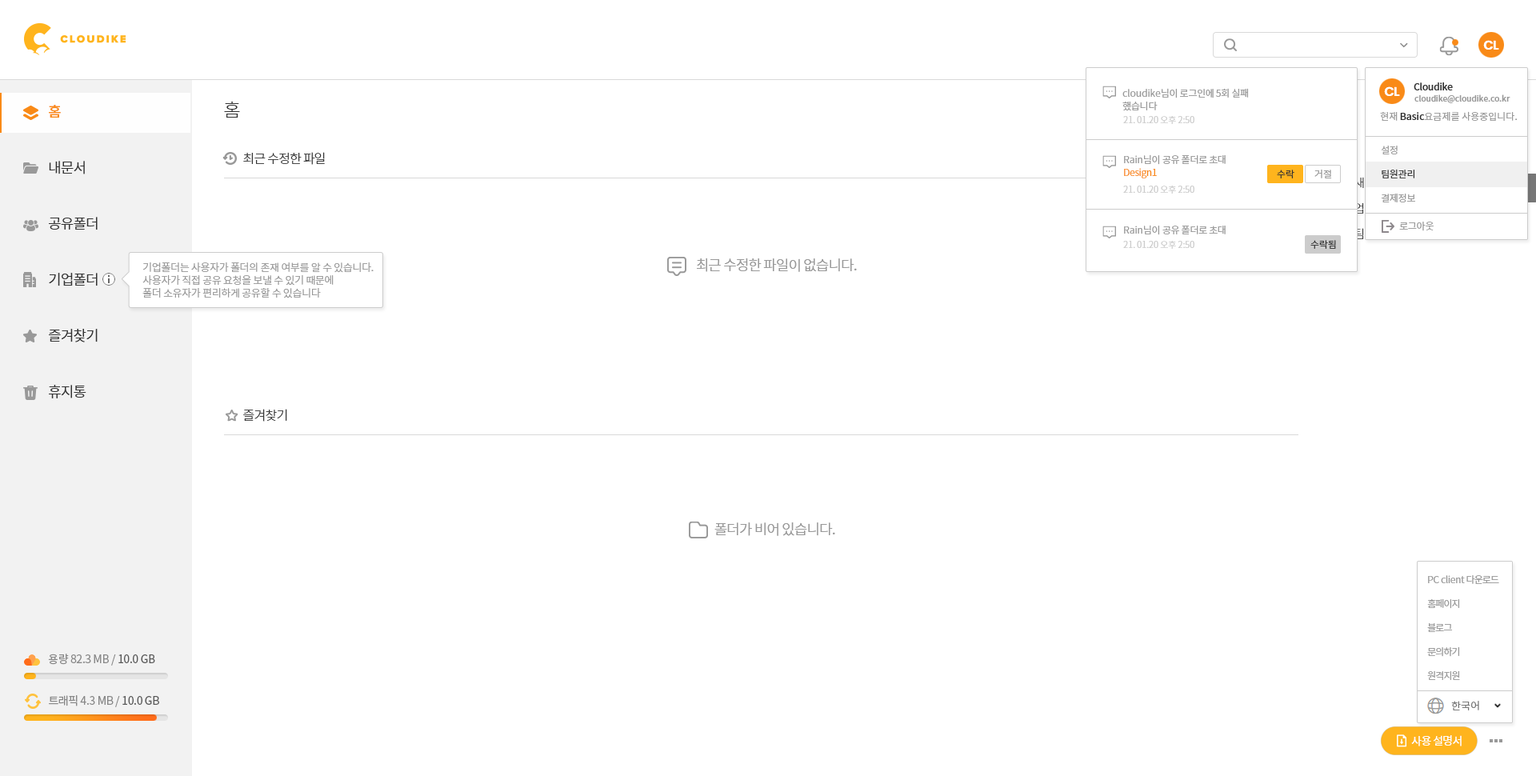
<style>
.page{position:relative;width:1536px;height:776px;background:#ffffff}
.page>*{position:absolute;margin:0}
.t1{font:12.8px "Poppins-SemiBold";letter-spacing:-0.05em;color:#ffffff}
.t2{font:9.6px/12.8px "NotoSansCJKkr-DemiLight";letter-spacing:-0.025em;color:#999999}
.t3{font:9.6px/12.8px "NotoSansCJKkr-DemiLight";color:#999999}
.t4{font:9.6px "NotoSansCJKkr-Medium";letter-spacing:-0.025em;color:#333333}
.t5{font:18.4px "NotoSansCJKkr-Light";letter-spacing:-0.05em;color:#333333}
.t6{font:8px "NotoSansCJKkr-Medium";color:#999999}
.t7{font:14.4px/56px "NotoSansCJKkr-DemiLight";letter-spacing:-0.05em;color:#333333}
.t8{font:14.4px/56px "NotoSansCJKkr-Medium";letter-spacing:-0.05em;color:#f98a17}
.t9{font:9.6px "NotoSansCJKkr-Regular";color:#999999}
.t10{font:9.6px "NotoSansCJKkr-Medium";color:#333333}
.t11{font:8.8px "NotoSansCJKkr-DemiLight";letter-spacing:-0.01em;color:#cccccc}
.t12{font:9.6px/24px "NotoSansCJKkr-DemiLight";letter-spacing:-0.025em;color:#333333}
.t13{font:9.6px/24px "NotoSansCJKkr-DemiLight";letter-spacing:-0.025em;color:#999999}
.t14{font:12.8px "NotoSansCJKkr-Light";letter-spacing:-0.05em;color:#333333}
.t15{font:9.6px/12.8px "NotoSansCJKkr-DemiLight";letter-spacing:-0.025em;color:#f98a17}
.t16{font:9.6px "NotoSansCJKkr-DemiLight";letter-spacing:-0.01em;color:#333333}
.t17{font:9.6px "NotoSansCJKkr-DemiLight";letter-spacing:-0.01em;color:#999999}
.t18{font:9.6px "NotoSansCJKkr-DemiLight";letter-spacing:-0.025em;color:#999999}
.t19{font:9.6px "NotoSansCJKkr-DemiLight";color:#999999}
.t20{font:14.4px "NotoSansCJKkr-DemiLight";letter-spacing:-0.05em;color:#999999}
.t21{font:10.4px/12.8px "NotoSansCJKkr-DemiLight";letter-spacing:-0.025em;color:#999999}
.t22{font:9.6px/24px "NotoSansCJKkr-DemiLight";letter-spacing:-0.075em;color:#999999}
.t23{font:11.2px "NotoSansCJKkr-Regular";letter-spacing:-0.025em;color:#888888}
.t24{font:11.2px "NotoSansCJKkr-Regular";letter-spacing:-0.025em;color:#585858}
.t25{font:10.4px "NotoSansCJKkr-DemiLight";color:#717171}
.t26{font:11.2px "NotoSansCJKkr-Regular";letter-spacing:-0.05em;color:#ffffff}
</style>
<div class="page">
<p class="t1" style="left:1484px;top:40px;width:16px;height:10px">CL</p>
<p class="t2" style="left:1123px;top:88px;width:126px;height:23px"><span class="t3">cloudike</span>님이 로그인에 5회 실패<br>했습니다</p>
<p class="t1" style="left:1384px;top:86px;width:16px;height:10px">CL</p>
<p class="t4" style="left:1414px;top:82px;width:39px;height:8px">Cloudike</p>
<p class="t5" style="left:224px;top:101px;width:16px;height:17px">홈</p>
<p class="t6" style="left:1415px;top:94px;width:96px;height:9px">cloudike@cloudike.co.kr</p>
<p class="t7" style="left:49px;top:105px;width:49px;height:293px"><span class="t8">홈<br></span>내문서<br>공유폴더<br>기업폴더<br>즐겨찾기<br>휴지통</p>
<p class="t9" style="left:1380px;top:111px;width:138px;height:10px">현재 <span class="t10">Basic</span>요금제를 사용중입니다.</p>
<p class="t11" style="left:1123px;top:116px;width:72px;height:8px">21. 01.20 오후 2:50</p>
<p class="t12" style="left:1381px;top:146px;width:34px;height:56px"><span class="t13">설정<br></span>팀원관리<br><span class="t13">결제정보</span></p>
<p class="t14" style="left:243px;top:152px;width:82px;height:13px">최근 수정한 파일</p>
<p class="t2" style="left:1124px;top:154px;width:102px;height:24px"><span class="t3">Rain</span>님이 공유 폴더로 초대<br><span class="t15">Design1</span></p>
<p class="t16" style="left:1277px;top:170px;width:18px;height:8px">수락</p>
<p class="t17" style="left:1315px;top:170px;width:17px;height:8px">거절</p>
<p class="t11" style="left:1123px;top:186px;width:72px;height:8px">21. 01.20 오후 2:50</p>
<p class="t18" style="left:1399px;top:222px;width:35px;height:9px">로그아웃</p>
<p class="t18" style="left:1124px;top:225px;width:102px;height:10px"><span class="t19">Rain</span>님이 공유 폴더로 초대</p>
<p class="t11" style="left:1123px;top:241px;width:72px;height:8px">21. 01.20 오후 2:50</p>
<p class="t16" style="left:1311px;top:240px;width:25px;height:9px">수락됨</p>
<p class="t20" style="left:697px;top:258px;width:160px;height:14px">최근 수정한 파일이 없습니다.</p>
<p class="t21" style="left:142px;top:262px;width:232px;height:36px">기업폴더는 사용자가 폴더의 존재 여부를 알 수 있습니다. <br>사용자가 직접 공유 요청을 보낼 수 있기 때문에 <br>폴더 소유자가 편리하게 공유할 수 있습니다</p>
<p class="t14" style="left:243px;top:409px;width:44px;height:13px">즐겨찾기</p>
<p class="t20" style="left:715px;top:523px;width:120px;height:13px">폴더가 비어 있습니다.</p>
<p class="t22" style="left:1427px;top:575px;width:73px;height:105px"><span class="t13">PC client </span>다운로드<br>홈페이지<br>블로그<br>문의하기<br>원격지원</p>
<p class="t23" style="left:48px;top:654px;width:107px;height:12px">용량 82.3 MB / <span class="t24">10.0 GB</span></p>
<p class="t23" style="left:49px;top:695px;width:110px;height:12px">트래픽 4.3 MB / <span class="t24">10.0 GB</span></p>
<p class="t25" style="left:1452px;top:701px;width:28px;height:10px">한국어</p>
<p class="t26" style="left:1411px;top:735px;width:51px;height:12px">사용 설명서</p>
<p class="t26" style="left:1411px;top:735px;width:51px;height:12px">사용 설명서</p>
</div>
